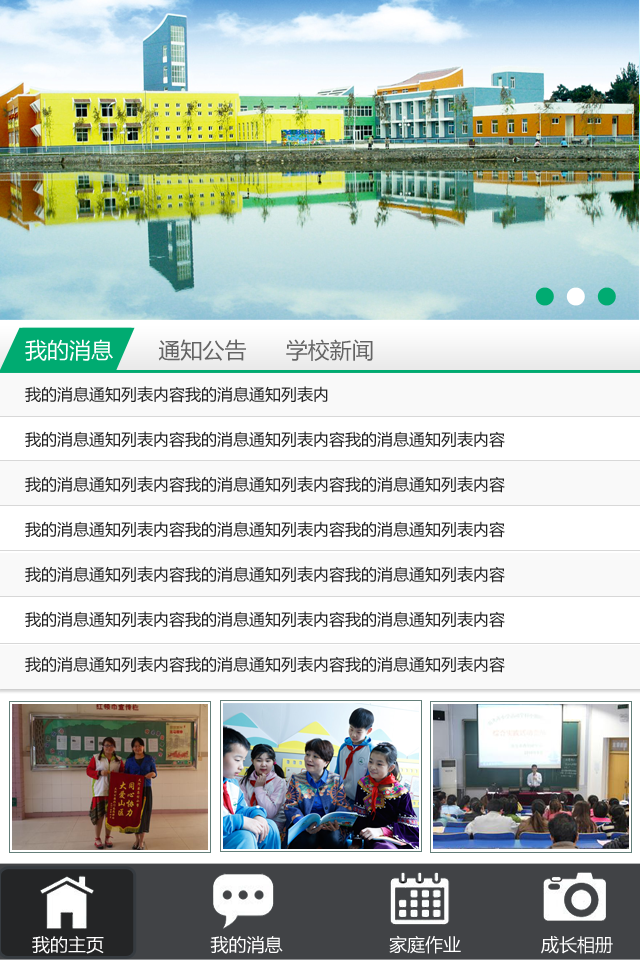
<style>
.page{position:relative;width:640px;height:960px}
.page>*{position:absolute;margin:0}
.t1{font:22px "MicrosoftYaHei";color:#646464}
.t2{font:22px "MicrosoftYaHei";color:#ffffff}
.t3{font:16px/45px "MicrosoftYaHei";color:#222222}
.t4{font:18px "MicrosoftYaHei";color:#ffffff}
</style>
<div class="page">
<p class="t1" style="left:25px;top:339px;width:348px;height:22px"><span class="t2">我的消息       </span>通知公告      学校新闻</p>
<p class="t3" style="left:25px;top:386px;width:480px;height:287px">我的消息通知列表内容我的消息通知列表内<br>我的消息通知列表内容我的消息通知列表内容我的消息通知列表内容<br>我的消息通知列表内容我的消息通知列表内容我的消息通知列表内容<br>我的消息通知列表内容我的消息通知列表内容我的消息通知列表内容<br>我的消息通知列表内容我的消息通知列表内容我的消息通知列表内容<br>我的消息通知列表内容我的消息通知列表内容我的消息通知列表内容<br>我的消息通知列表内容我的消息通知列表内容我的消息通知列表内容</p>
<p class="t4" style="left:32px;top:935px;width:581px;height:19px">我的主页                    我的消息                    家庭作业               成长相册</p>
</div>
